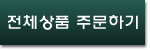
<style>
.page{position:relative;width:150px;height:50px}
.page>*{position:absolute;margin:0}
.t1{font:16px "HYwulM";color:#fefefe}
</style>
<div class="page">
<p class="t1" style="left:8px;top:15px;width:130px;height:15px">전체상품 주문하기</p>
</div>
